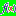
<style>
.page{position:relative;width:16px;height:16px;background:#00ff00}
.page>*{position:absolute;margin:0}
.t1{font:12px "MonotypeCorsiva";color:#25237b}
.t2{font:9px "ArialMT";color:#25237b}
.t3{font:9px "ArialMT";color:#d23c3c}
</style>
<div class="page">
<p class="t1" style="left:0px;top:2px;width:16px;height:13px">f<span class="t2">(</span><span class="t3">x</span><span class="t2">)</span></p>
</div>
